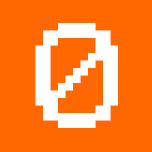
<style>
.page{position:relative;width:152px;height:152px;background:#ff6700}
.page>*{position:absolute;margin:0}
.t1{font:120px "Terminal";color:#fefefe}
</style>
<div class="page">
<p class="t1" style="left:35px;top:23px;width:83px;height:105px">0</p>
</div>
